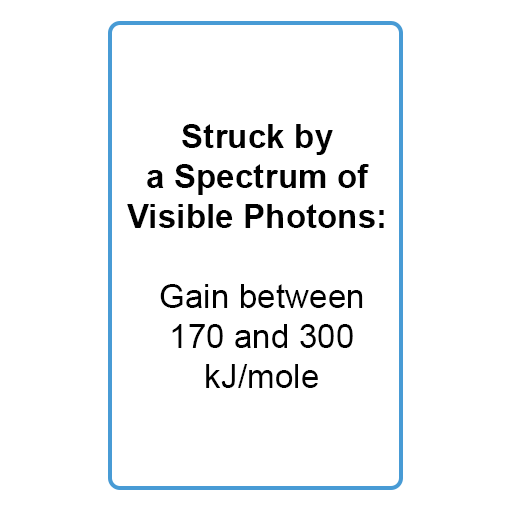
<style>
.page{position:relative;width:512px;height:512px;background:#ffffff}
.page>*{position:absolute;margin:0}
.t1{font:33.3px "Arial-BoldMT";color:#000000}
.t2{font:33.3px "ArialMT";color:#000000}
</style>
<div class="page">
<p class="t1" style="left:127px;top:124px;width:257px;height:264px;text-align:center">Struck by <br>a Spectrum of <br>Visible Photons: <br><span class="t2"><br> Gain between <br>170 and 300<br>kJ/mole</span></p>
</div>
